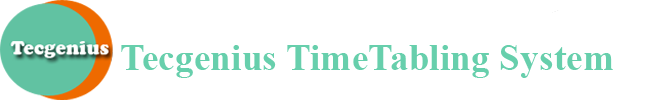
<style>
.page{position:relative;width:653px;height:100px;background:#ffffff}
.page>*{position:absolute;margin:0}
.t1{font:37.5px "TimesNewRomanPS-BoldMT";color:#67cfac}
</style>
<div class="page">
<p class="t1" style="left:121px;top:45px;width:492px;height:33px">Tecgenius TimeTabling System</p>
</div>
